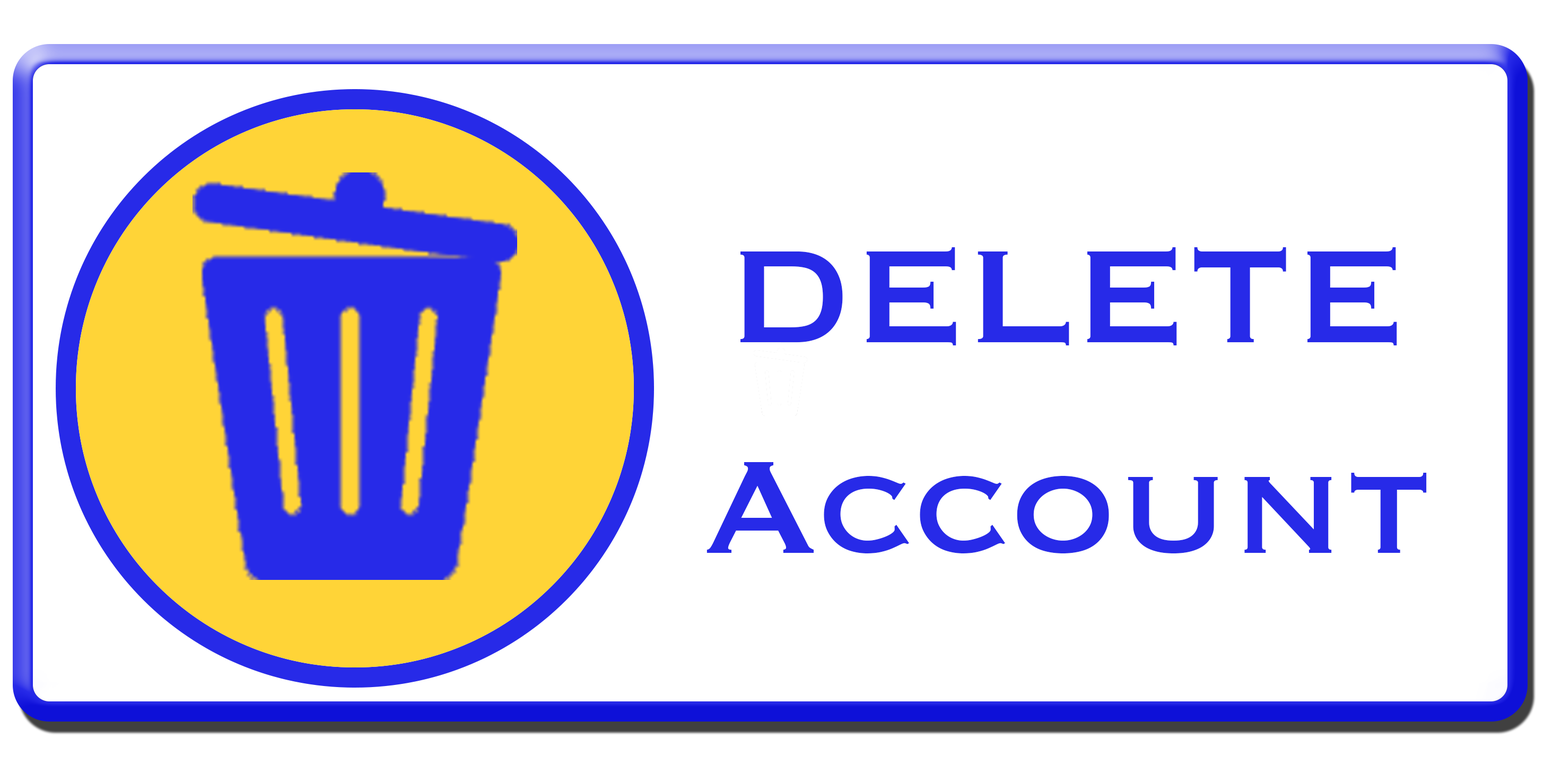
<style>
.page{position:relative;width:1561px;height:764px;background:#ffffff}
.page>*{position:absolute;margin:0}
.t1{font:172.4px "Copperplate";color:#272ae8}
</style>
<div class="page">
<p class="t1" style="left:707px;top:247px;width:720px;height:306px;text-align:center">DELETE<br>Account</p>
</div>
